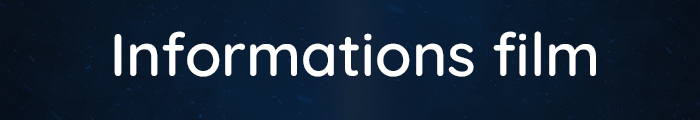
<style>
.page{position:relative;width:700px;height:120px}
.page>*{position:absolute;margin:0}
.t1{font:60px "Quicksand-SemiBold";color:#ffffff}
</style>
<div class="page">
<p class="t1" style="left:114px;top:31px;width:482px;height:46px">Informations film</p>
</div>
